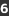
<style>
.page{position:relative;width:9px;height:16px;background:#333333}
.page>*{position:absolute;margin:0}
.t1{font:12.5px "RoundedMplus1c-ExtraBold";color:#ffffff}
</style>
<div class="page">
<p class="t1" style="left:0px;top:3px;width:8px;height:11px">6</p>
</div>
